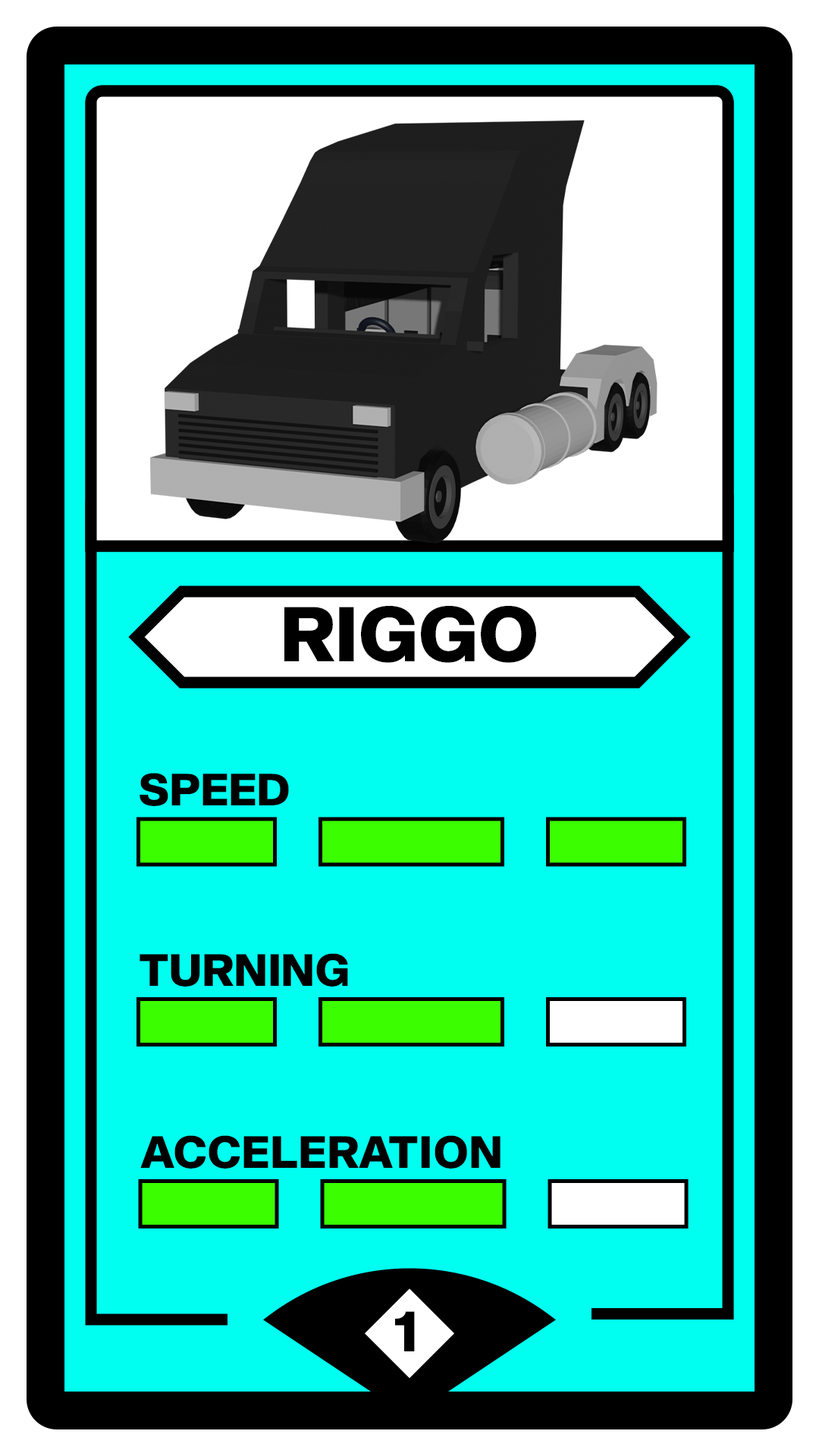
<style>
.page{position:relative;width:819px;height:1456px;background:#00fff0}
.page>*{position:absolute;margin:0}
.t1{font:75.8px "Shapiro-85SuperHeavy";letter-spacing:-0.01em;color:#000000}
.t2{font:44.2px "Shapiro-85SuperHeavy";letter-spacing:-0.01em;color:#000000}
.t3{font:44.2px "Shapiro-85SuperHeavy";letter-spacing:-0.01em;color:#000000;text-transform:uppercase}
.t4{font:56.9px "Shapiro-85SuperHeavy";letter-spacing:-0.01em;color:#000000}
</style>
<div class="page">
<p class="t1" style="left:284px;top:606px;width:252px;height:57px">RIGGO</p>
<p class="t2" style="left:140px;top:773px;width:149px;height:33px">SPEED</p>
<p class="t2" style="left:140px;top:953px;width:208px;height:34px">TURNING</p>
<p class="t3" style="left:140px;top:1135px;width:360px;height:34px">acceleration</p>
<p class="t4" style="left:395px;top:1311px;width:20px;height:40px">1</p>
</div>
